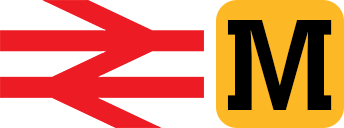
<style>
.page{position:relative;width:344px;height:128px;background:#ffffff}
.page>*{position:absolute;margin:0}
.t1{font:128px "CalvertMTStd-Bold";color:#000000}
</style>
<div class="page">
<p class="t1" style="left:227px;top:20px;width:105px;height:90px">M</p>
</div>
